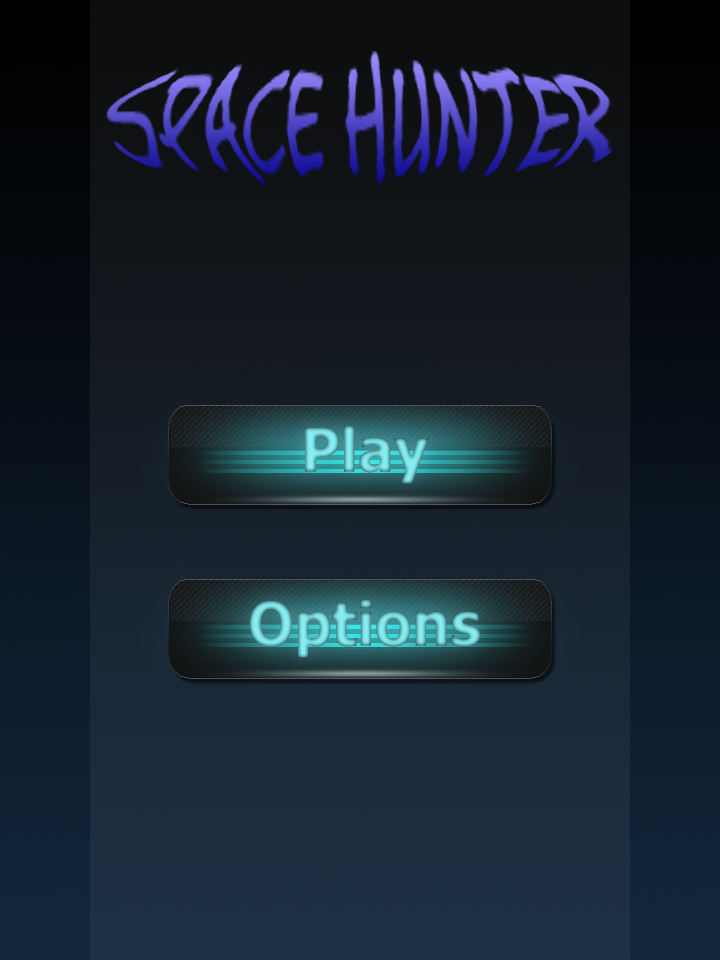
<style>
.page{position:relative;width:720px;height:960px}
.page>*{position:absolute;margin:0}
.t1{font:60px "Tahoma-Bold"}
</style>
<div class="page">
<p class="t1" style="left:305px;top:426px;width:124px;height:58px">Play</p>
<p class="t1" style="left:249px;top:599px;width:232px;height:59px">Options</p>
</div>
